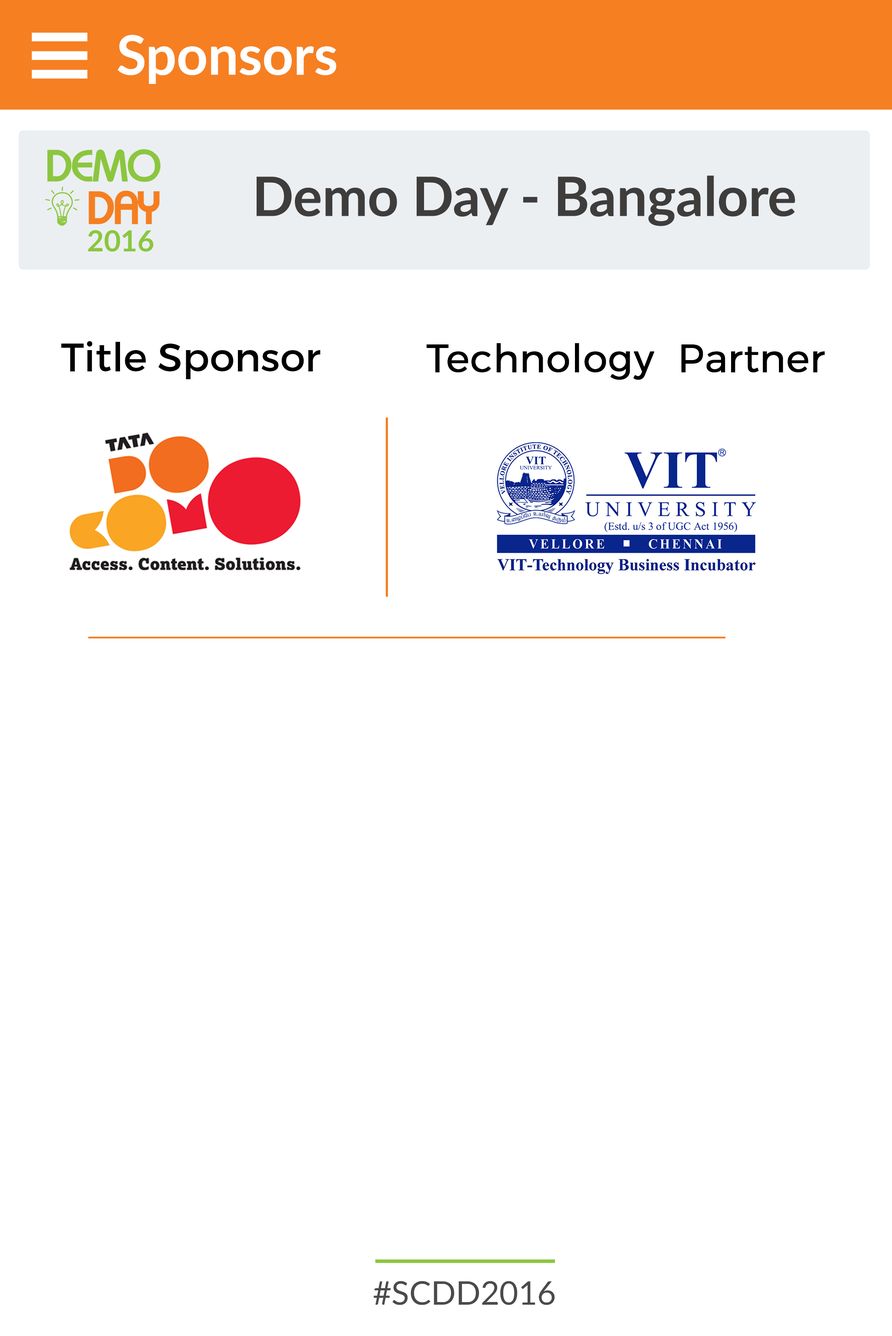
<style>
.page{position:relative;width:892px;height:1336px;background:#ffffff}
.page>*{position:absolute;margin:0}
.t1{font:54.4px "Lato-Bold";color:#ffffff}
.t2{font:54.4px "Lato-Bold";color:#3e3d3c}
.t3{font:40.1px "Montserrat-Regular";color:#000000}
.t4{font:38.8px "Montserrat-Light";color:#000000;font-weight:bold}
.t5{font:32.6px "Lato-Regular";color:#4a4b49}
</style>
<div class="page">
<p class="t1" style="left:117px;top:35px;width:219px;height:49px">Sponsors</p>
<p class="t2" style="left:257px;top:175px;width:538px;height:51px">Demo Day - Bangalore</p>
<p class="t3" style="left:61px;top:341px;width:260px;height:38px">Title Sponsor</p>
<p class="t4" style="left:426px;top:343px;width:399px;height:37px">Technology  Partner</p>
<p class="t5" style="left:374px;top:1281px;width:181px;height:25px">#SCDD2016</p>
</div>
